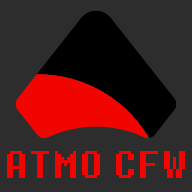
<style>
.page{position:relative;width:192px;height:192px;background:#2d2d2d}
.page>*{position:absolute;margin:0}
.t1{font:36px "BIG-SHOT";color:#f00500}
</style>
<div class="page">
<p class="t1" style="left:7px;top:151px;width:93px;height:27px">ATMO</p>
<p class="t1" style="left:116px;top:151px;width:69px;height:27px">CFW</p>
</div>
